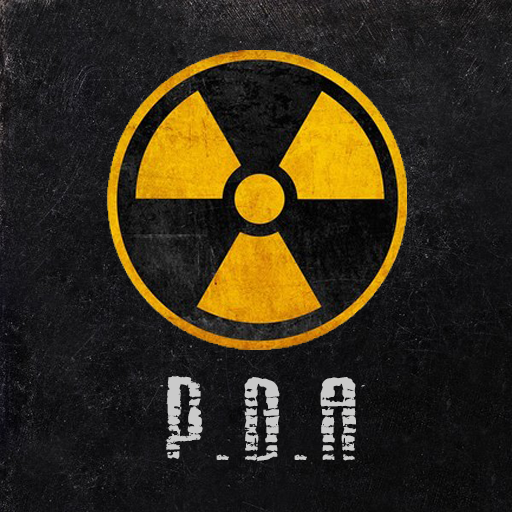
<style>
.page{position:relative;width:512px;height:512px}
.page>*{position:absolute;margin:0}
.t1{font:110px "AmazS.T.A.L.K.E.R.v.3.0";letter-spacing:0.05em;color:#cacaca;scale:1.5 1}
</style>
<div class="page">
<p class="t1" style="left:160px;top:376px;width:205px;height:85px">P.D.A</p>
</div>
